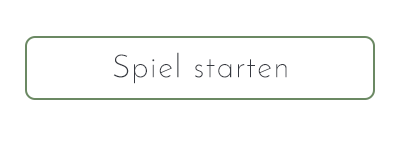
<style>
.page{position:relative;width:401px;height:143px;background:#ffffff}
.page>*{position:absolute;margin:0}
.t1{font:32px "JosefinSans-Light";letter-spacing:0.075em;color:#363940}
</style>
<div class="page">
<p class="t1" style="left:113px;top:52px;width:174px;height:32px">Spiel starten</p>
</div>
